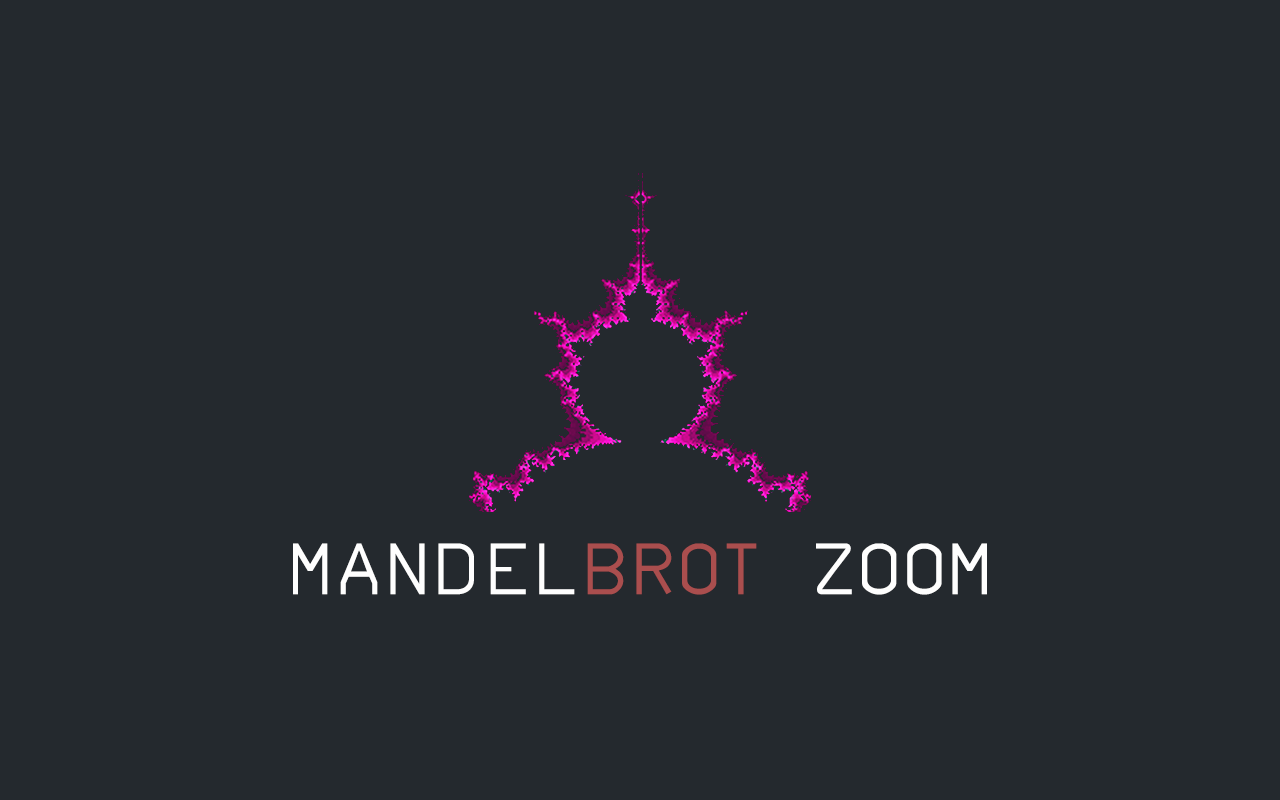
<style>
.page{position:relative;width:1280px;height:800px;background:#24292e}
.page>*{position:absolute;margin:0}
.t1{font:72px "AirbusDisp2";color:#fefefe}
.t2{font:72px "AirbusDisp2";color:#aa4e4e}
</style>
<div class="page">
<p class="t1" style="left:293px;top:543px;width:694px;height:52px">Mandel<span class="t2">brot</span> Zoom</p>
</div>
